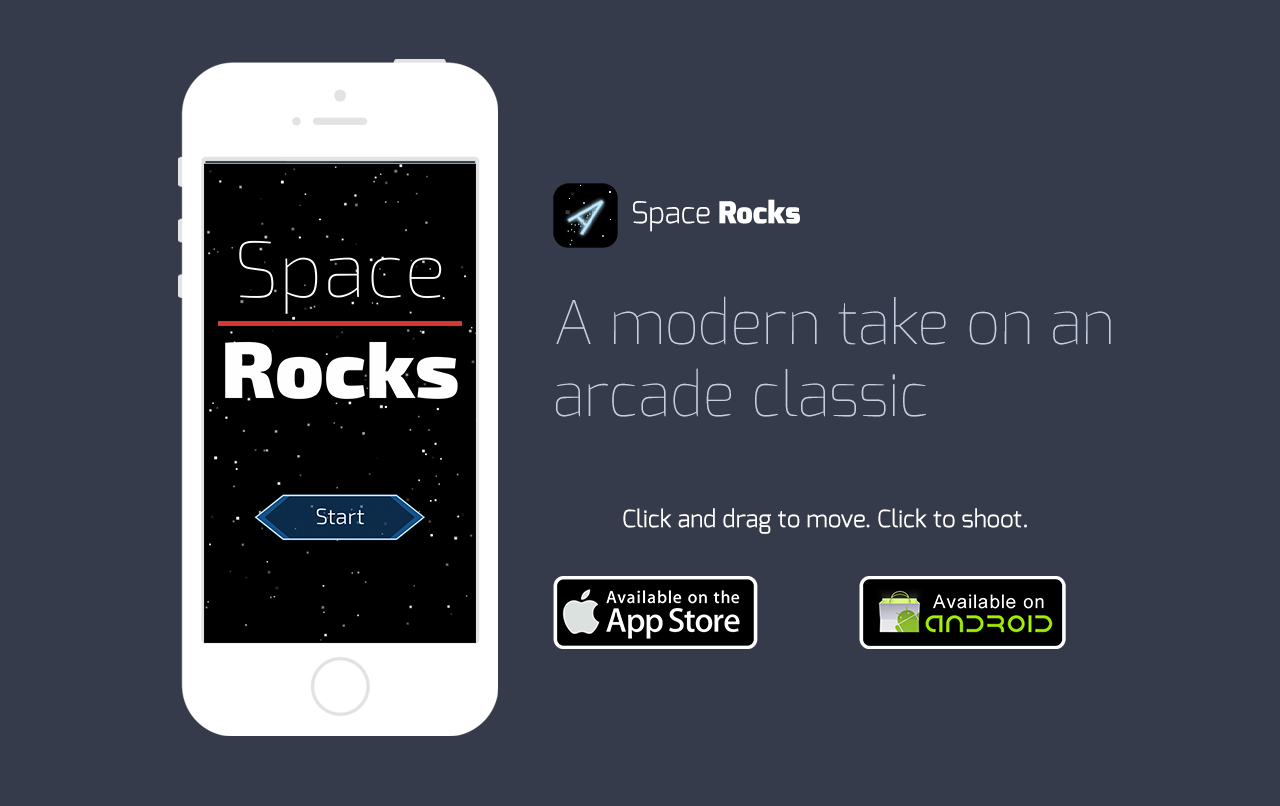
<style>
.page{position:relative;width:1280px;height:806px;background:#353b4a}
.page>*{position:absolute;margin:0}
.t1{font:30px "Exo-Light";color:#ffffff}
.t2{font:30px "Exo-Black";color:#ffffff}
.t3{font:60px "Exo-Thin";color:#c5cee3}
.t4{font:24px "Exo-Regular";color:#ffffff}
</style>
<div class="page">
<p class="t1" style="left:633px;top:199px;width:167px;height:33px">Space <span class="t2">Rocks</span></p>
<p class="t3" style="left:556px;top:296px;width:555px;height:121px">A modern take on an<br>arcade classic</p>
<p class="t4" style="left:623px;top:508px;width:404px;height:26px">Click and drag to move. Click to shoot.</p>
</div>
